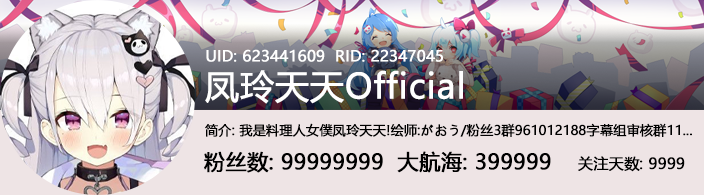
<style>
.page{position:relative;width:704px;height:195px;background:#eee4e5}
.page>*{position:absolute;margin:0}
.t1{font:15px "MicrosoftYaHei";color:#ffffff;font-weight:bold}
.t2{font:34px "MicrosoftYaHei";color:#ffffff;font-weight:bold}
.t3{font:13px "MicrosoftYaHei";color:#000000;font-weight:bold}
.t4{font:21px "MicrosoftYaHei";color:#000000;font-weight:bold}
.t5{font:15px "MicrosoftYaHei";color:#000000;font-weight:bold}
</style>
<div class="page">
<p class="t1" style="left:206px;top:49px;width:237px;height:13px">UID: 623441609  RID: 22347045</p>
<p class="t2" style="left:205px;top:70px;width:258px;height:34px">凤玲天天Official</p>
<p class="t3" style="left:205px;top:123px;width:487px;height:14px">简介: 我是料理人女僕凤玲天天!绘师:がおう/粉丝3群961012188字幕组审核群11...</p>
<p class="t4" style="left:204px;top:151px;width:347px;height:22px">粉丝数: 99999999  大航海: 399999</p>
<p class="t5" style="left:578px;top:156px;width:107px;height:16px">关注天数: 9999</p>
</div>
